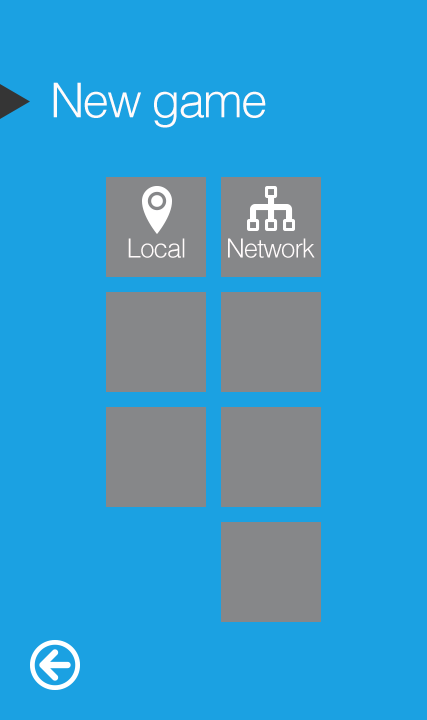
<style>
.page{position:relative;width:427px;height:720px;background:#1ba1e2}
.page>*{position:absolute;margin:0}
.t1{font:48px "Helvetica-Light";letter-spacing:-0.04em;color:#fffbfb}
.t2{font:26.1px "Helvetica-Light";letter-spacing:-0.04em;color:#fffbfb}
</style>
<div class="page">
<p class="t1" style="left:53px;top:82px;width:213px;height:46px">New game</p>
<p class="t2" style="left:128px;top:238px;width:57px;height:20px">Local</p>
<p class="t2" style="left:228px;top:238px;width:87px;height:20px">Network</p>
</div>
